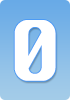
<style>
.page{position:relative;width:70px;height:100px;background:#ffffff}
.page>*{position:absolute;margin:0}
.t1{font:81px "Krungthep";color:#ffffff}
</style>
<div class="page">
<p class="t1" style="left:14px;top:20px;width:42px;height:61px">0</p>
</div>
